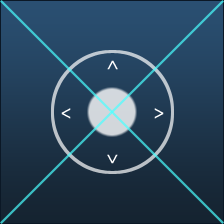
<style>
.page{position:relative;width:224px;height:224px}
.page>*{position:absolute;margin:0}
.t1{font:18px "NanumSquareR";color:#ffffff}
</style>
<div class="page">
<p class="t1" style="left:107px;top:60px;width:11px;height:10px;rotate:90deg">&lt;</p>
<p class="t1" style="left:61px;top:108px;width:10px;height:11px">&lt;</p>
<p class="t1" style="left:154px;top:108px;width:10px;height:11px">&gt;</p>
<p class="t1" style="left:107px;top:154px;width:11px;height:10px;rotate:-90deg">&lt;</p>
</div>
